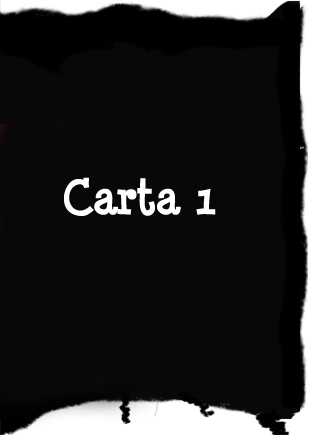
<style>
.page{position:relative;width:311px;height:435px;background:#090808}
.page>*{position:absolute;margin:0}
.t1{font:45px "MinyaNouvelleBold";color:#ffffff}
</style>
<div class="page">
<p class="t1" style="left:64px;top:177px;width:152px;height:39px">Carta 1</p>
</div>
